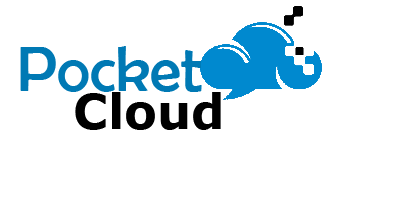
<style>
.page{position:relative;width:400px;height:200px;background:#ffffff}
.page>*{position:absolute;margin:0}
.t1{font:64px "BerlinSansFB-Reg";color:#0079b4}
.t2{font:48px "Verdana-Bold";color:#000000}
</style>
<div class="page">
<p class="t1" style="left:20px;top:46px;width:182px;height:46px">Pocket</p>
<p class="t2" style="left:75px;top:92px;width:146px;height:38px">Cloud</p>
</div>
